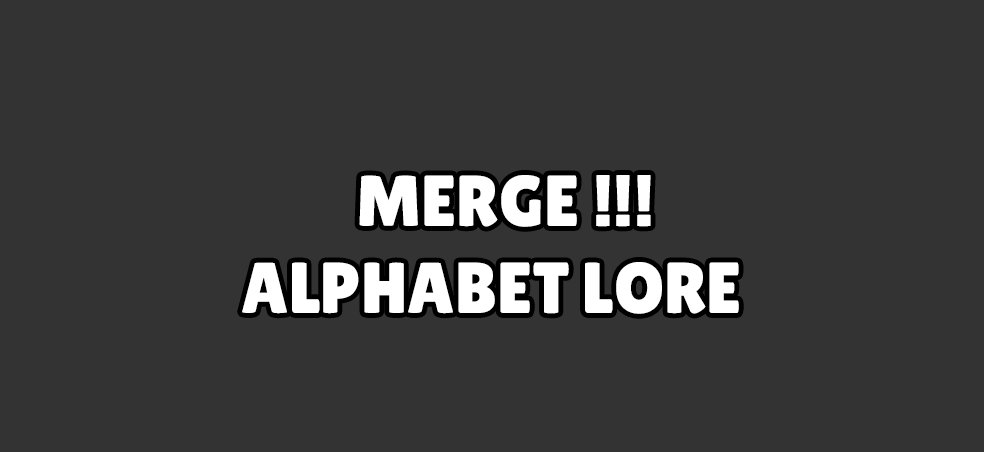
<style>
.page{position:relative;width:984px;height:452px;background:#333333}
.page>*{position:absolute;margin:0}
.t1{font:72px "LilitaOne";color:#ffffff}
</style>
<div class="page">
<p class="t1" style="left:242px;top:175px;width:497px;height:139px;text-align:center">MERGE !!!<br>ALPHABET LORE</p>
</div>
